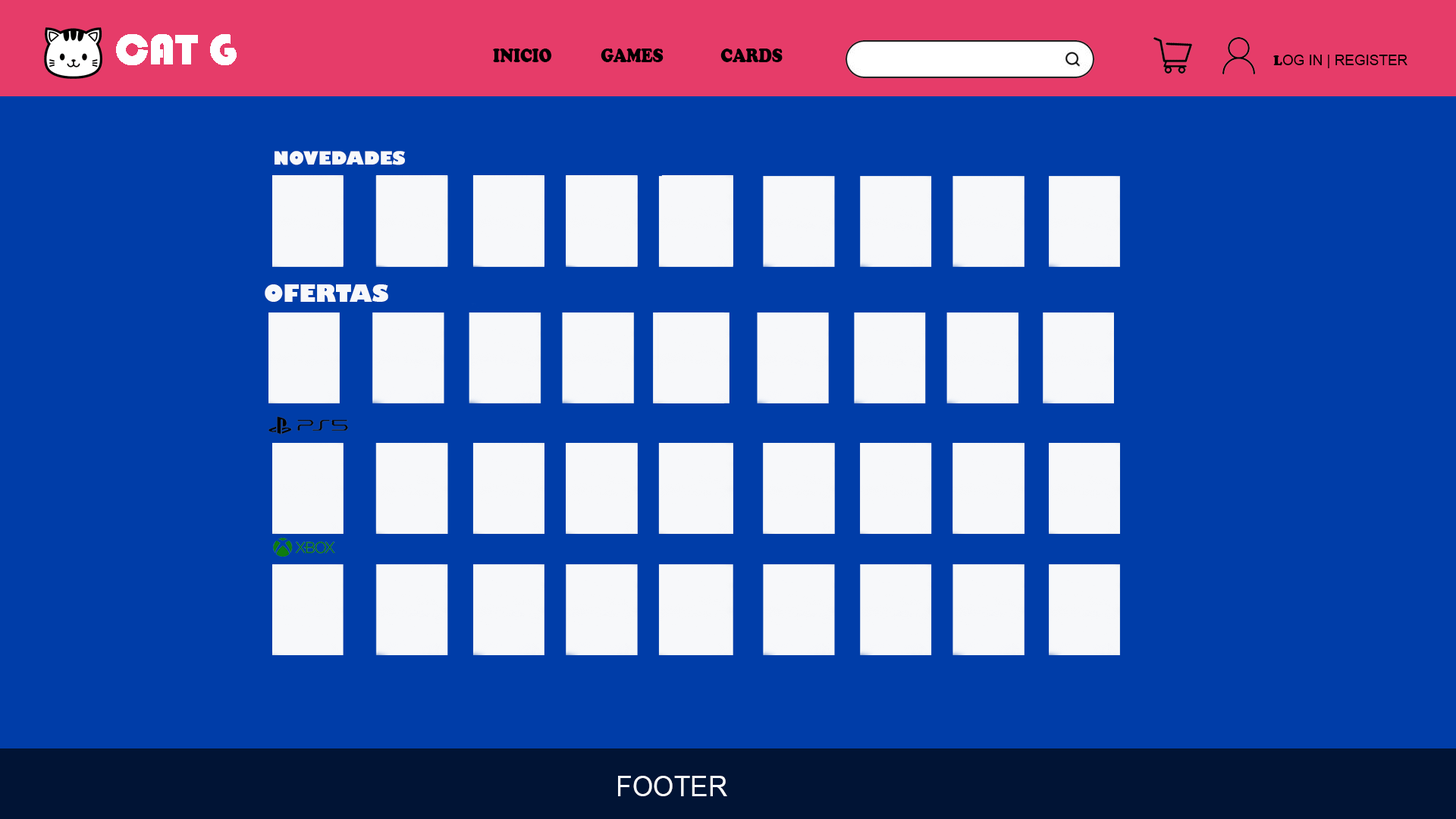
<style>
.page{position:relative;width:1456px;height:819px;background:#003da8}
.page>*{position:absolute;margin:0}
.t1{font:20.7px "CooperBlack";color:#000000;scale:0.79 1}
.t2{font:14.3px "ArialMT";color:#000000}
.t3{font:14.3px "CooperBlack";color:#000000}
.t4{font:17.8px "GillSans-UltraBold";color:#f7f8fa}
.t5{font:22.7px "GillSans-UltraBold";color:#f7f8fa}
.t6{font:28.9px "ArialMT";color:#f7f8fa;scale:0.93 1}
</style>
<div class="page">
<p class="t1" style="left:493px;top:49px;width:290px;height:13px">INICIO            GAMES              CARDS</p>
<p class="t2" style="left:1273px;top:55px;width:134px;height:13px"><span class="t3">L</span>OG IN | REGISTER</p>
<p class="t4" style="left:275px;top:151px;width:130px;height:14px">NOVEDADES</p>
<p class="t5" style="left:265px;top:284px;width:123px;height:18px">OFERTAS</p>
<p class="t6" style="left:618px;top:776px;width:109px;height:20px">FOOTER</p>
</div>
